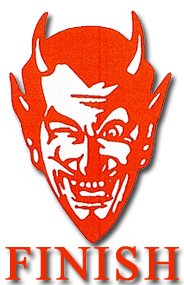
<style>
.page{position:relative;width:184px;height:285px;background:#ffffff}
.page>*{position:absolute;margin:0}
.t1{font:48px "TimesNewRomanPSMT";letter-spacing:0.05em;color:#f02b01;font-weight:bold}
</style>
<div class="page">
<p class="t1" style="left:5px;top:246px;width:174px;height:35px">FINISH</p>
</div>
